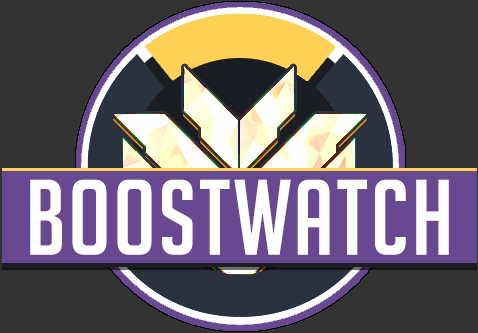
<style>
.page{position:relative;width:478px;height:333px;background:#333333}
.page>*{position:absolute;margin:0}
.t1{font:104.2px "BigNoodleTitling";letter-spacing:0.03em;color:#fefefe}
</style>
<div class="page">
<p class="t1" style="left:30px;top:179px;width:419px;height:76px">BOOSTWATCH</p>
</div>
